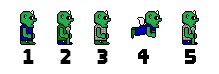
<style>
.page{position:relative;width:219px;height:74px;background:#ffffff}
.page>*{position:absolute;margin:0}
.t1{font:16px "DefendYourFortFilled";color:#000000}
</style>
<div class="page">
<p class="t1" style="left:23px;top:49px;width:11px;height:15px">1</p>
<p class="t1" style="left:60px;top:49px;width:11px;height:15px">2</p>
<p class="t1" style="left:97px;top:49px;width:11px;height:15px">3</p>
<p class="t1" style="left:138px;top:49px;width:11px;height:15px">4</p>
<p class="t1" style="left:185px;top:49px;width:11px;height:15px">5</p>
</div>
